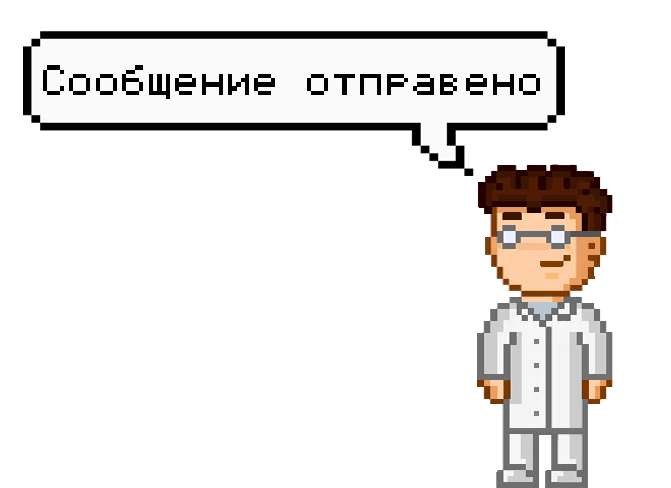
<style>
.page{position:relative;width:671px;height:488px;background:#ffffff}
.page>*{position:absolute;margin:0}
.t1{font:36.4px "LCD5x8H";color:#000000;font-weight:bold}
</style>
<div class="page">
<p class="t1" style="left:43px;top:65px;width:497px;height:34px">Сообщение отправено</p>
</div>
